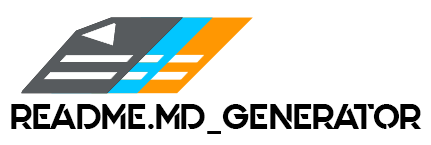
<style>
.page{position:relative;width:431px;height:145px;background:#ffffff}
.page>*{position:absolute;margin:0}
.t1{font:36.1px "Quantify";color:#010101}
</style>
<div class="page">
<p class="t1" style="left:11px;top:104px;width:411px;height:30px">README.MD_GENERATOR</p>
</div>
